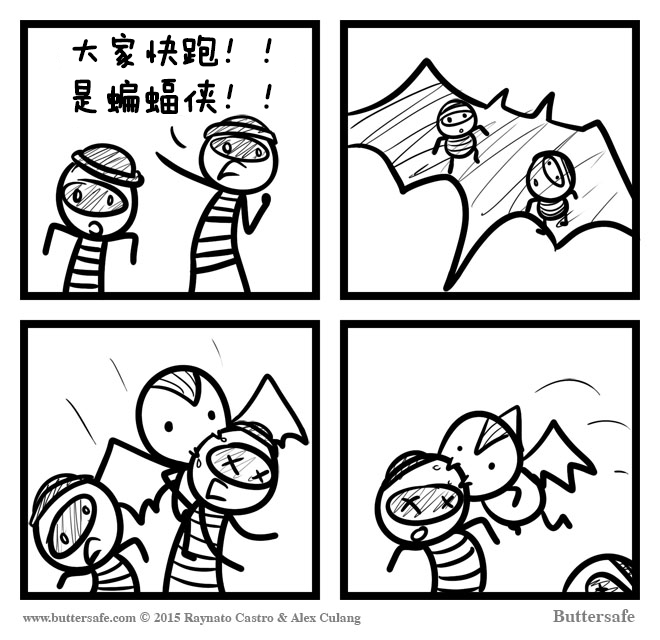
<style>
.page{position:relative;width:660px;height:640px;background:#ffffff}
.page>*{position:absolute;margin:0}
.t1{font:37.5px/45.8px "FZMWJW--GB1-0";color:#000000;font-weight:bold}
</style>
<div class="page">
<p class="t1" style="left:72px;top:32px;width:200px;height:82px">大家快跑！！<br>是蝙蝠侠！！</p>
</div>
